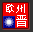
<style>
.page{position:relative;width:33px;height:32px;background:#f20000}
.page>*{position:absolute;margin:0}
.t1{font:10.4px "SimSun";color:#ffffff}
.t2{font:11.7px "SimSun";color:#ffffff}
</style>
<div class="page">
<p class="t1" style="left:6px;top:4px;width:19px;height:9px">欧州</p>
<p class="t2" style="left:16px;top:15px;width:11px;height:12px">晋</p>
</div>
